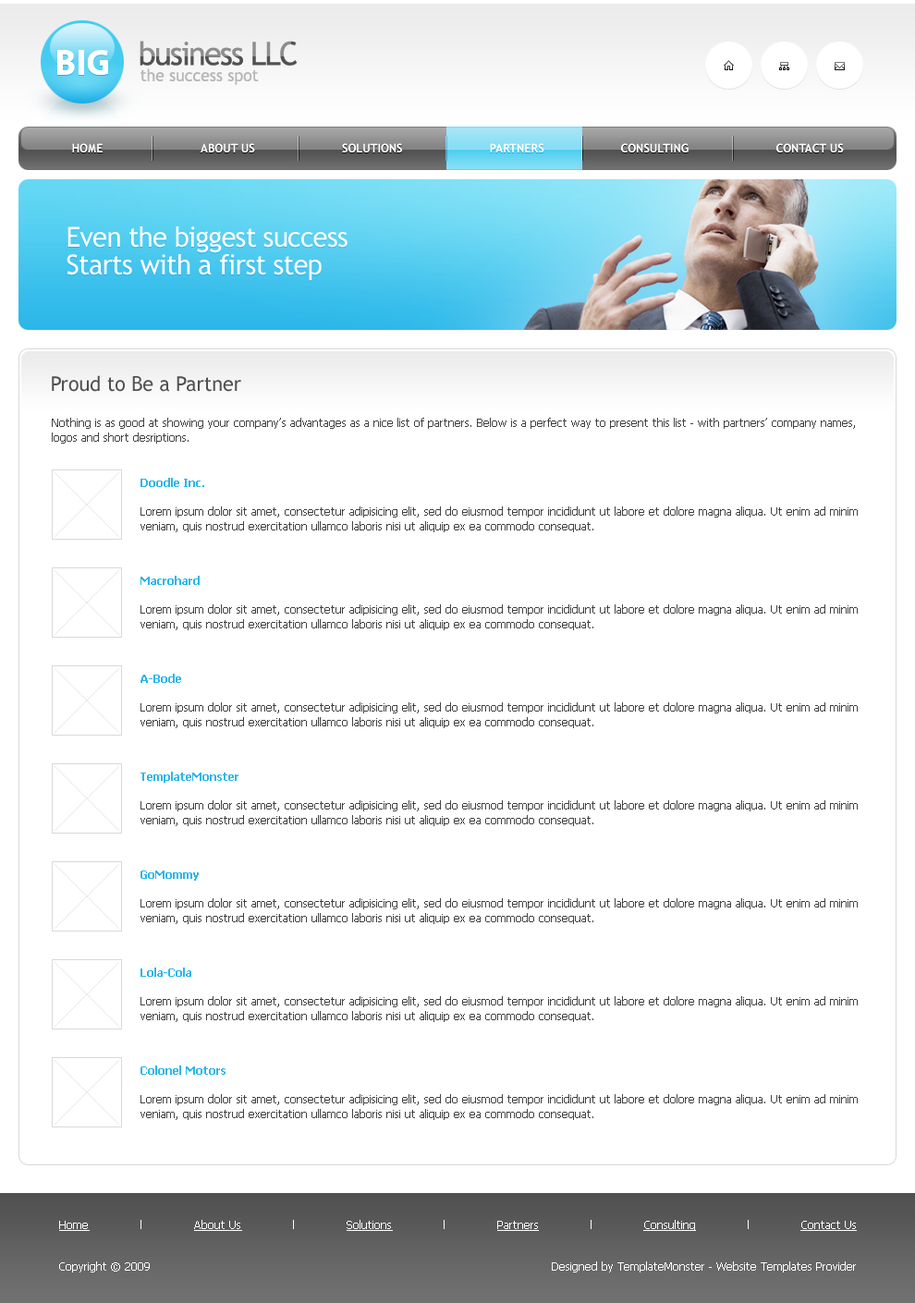
<style>
.page{position:relative;width:915px;height:1303px;background:#ffffff}
.page>*{position:absolute;margin:0}
.t1{font:32.3px "TrebuchetMS";letter-spacing:-0.05em}
.t2{font:16.6px "TrebuchetMS";color:#b7b7b7}
.t3{font:12px "TrebuchetMS-Bold";color:#ffffff;scale:0.96 1}
.t4{font:27.7px/27.7px "TrebuchetMS";letter-spacing:-0.025em;color:#ffffff}
.t5{font:20.3px "TrebuchetMS";color:#515151}
.t6{font:11.1px/14.8px "Tahoma";color:#404141}
.t7{font:11.1px/14.8px "Tahoma-Bold";color:#2cb6e9}
.t8{font:11.1px "Tahoma";color:#ffffff;text-decoration:underline}
.t9{font:11.1px "Tahoma";color:#ffffff}
</style>
<div class="page">
<p class="t1" style="left:140px;top:41px;width:158px;height:25px">business LLC</p>
<p class="t2" style="left:140px;top:68px;width:119px;height:17px">the success spot</p>
<p class="t3" style="left:72px;top:143px;width:772px;height:10px">HOME                            ABOUT US                         SOLUTIONS                         PARTNERS                      CONSULTING                         CONTACT US</p>
<p class="t4" style="left:67px;top:226px;width:281px;height:55px">Even the biggest success<br>Starts with a first step</p>
<p class="t5" style="left:52px;top:375px;width:189px;height:17px">Proud to Be a Partner</p>
<p class="t6" style="left:52px;top:418px;width:803px;height:26px">Nothing is as good at showing your company’s advantages as a nice list of partners. Below is a perfect way to present this list - with partners’ company names, logos and short desriptions.</p>
<p class="t6" style="left:140px;top:478px;width:718px;height:54px"><span class="t7">Doodle Inc.<br><br></span>Lorem ipsum dolor sit amet, consectetur adipisicing elit, sed do eiusmod tempor incididunt ut labore et dolore magna aliqua. Ut enim ad minim veniam, quis nostrud exercitation ullamco laboris nisi ut aliquip ex ea commodo consequat.</p>
<p class="t6" style="left:140px;top:576px;width:718px;height:54px"><span class="t7">Macrohard<br><br></span>Lorem ipsum dolor sit amet, consectetur adipisicing elit, sed do eiusmod tempor incididunt ut labore et dolore magna aliqua. Ut enim ad minim veniam, quis nostrud exercitation ullamco laboris nisi ut aliquip ex ea commodo consequat.</p>
<p class="t6" style="left:140px;top:674px;width:718px;height:54px"><span class="t7">A-Bode<br><br></span>Lorem ipsum dolor sit amet, consectetur adipisicing elit, sed do eiusmod tempor incididunt ut labore et dolore magna aliqua. Ut enim ad minim veniam, quis nostrud exercitation ullamco laboris nisi ut aliquip ex ea commodo consequat.</p>
<p class="t6" style="left:140px;top:772px;width:718px;height:54px"><span class="t7">TemplateMonster<br><br></span>Lorem ipsum dolor sit amet, consectetur adipisicing elit, sed do eiusmod tempor incididunt ut labore et dolore magna aliqua. Ut enim ad minim veniam, quis nostrud exercitation ullamco laboris nisi ut aliquip ex ea commodo consequat.</p>
<p class="t6" style="left:140px;top:871px;width:718px;height:53px"><span class="t7">GoMommy<br><br></span>Lorem ipsum dolor sit amet, consectetur adipisicing elit, sed do eiusmod tempor incididunt ut labore et dolore magna aliqua. Ut enim ad minim veniam, quis nostrud exercitation ullamco laboris nisi ut aliquip ex ea commodo consequat.</p>
<p class="t6" style="left:140px;top:968px;width:718px;height:54px"><span class="t7">Lola-Cola<br><br></span>Lorem ipsum dolor sit amet, consectetur adipisicing elit, sed do eiusmod tempor incididunt ut labore et dolore magna aliqua. Ut enim ad minim veniam, quis nostrud exercitation ullamco laboris nisi ut aliquip ex ea commodo consequat.</p>
<p class="t6" style="left:140px;top:1066px;width:718px;height:54px"><span class="t7">Colonel Motors<br><br></span>Lorem ipsum dolor sit amet, consectetur adipisicing elit, sed do eiusmod tempor incididunt ut labore et dolore magna aliqua. Ut enim ad minim veniam, quis nostrud exercitation ullamco laboris nisi ut aliquip ex ea commodo consequat.</p>
<p class="t8" style="left:59px;top:1220px;width:798px;height:11px">Home<span class="t9">              l              </span>About Us<span class="t9">              l              </span>Solutions<span class="t9">              l              </span>Partners<span class="t9">              l              </span>Consulting<span class="t9">              l              </span>Contact Us</p>
<p class="t9" style="left:59px;top:1262px;width:91px;height:11px">Copyright © 2009</p>
<p class="t9" style="left:552px;top:1262px;width:304px;height:11px">Designed by TemplateMonster - Website Templates Provider</p>
</div>
